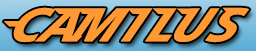
<style>
.page{position:relative;width:256px;height:51px;background:#ff9933}
.page>*{position:absolute;margin:0}
.t1{font:45.7px "Speedy12";color:#ff9933}
</style>
<div class="page">
<p class="t1" style="left:3px;top:7px;width:247px;height:36px">CAMILUS</p>
</div>
